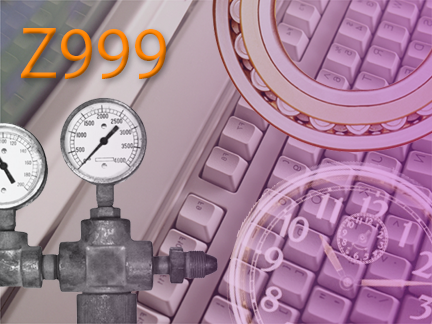
<style>
.page{position:relative;width:432px;height:324px}
.page>*{position:absolute;margin:0}
.t1{font:74.5px "MyriadPro-Regular";scale:0.96 1}
</style>
<div class="page">
<p class="t1" style="left:21px;top:28px;width:145px;height:51px">Z999</p>
</div>
